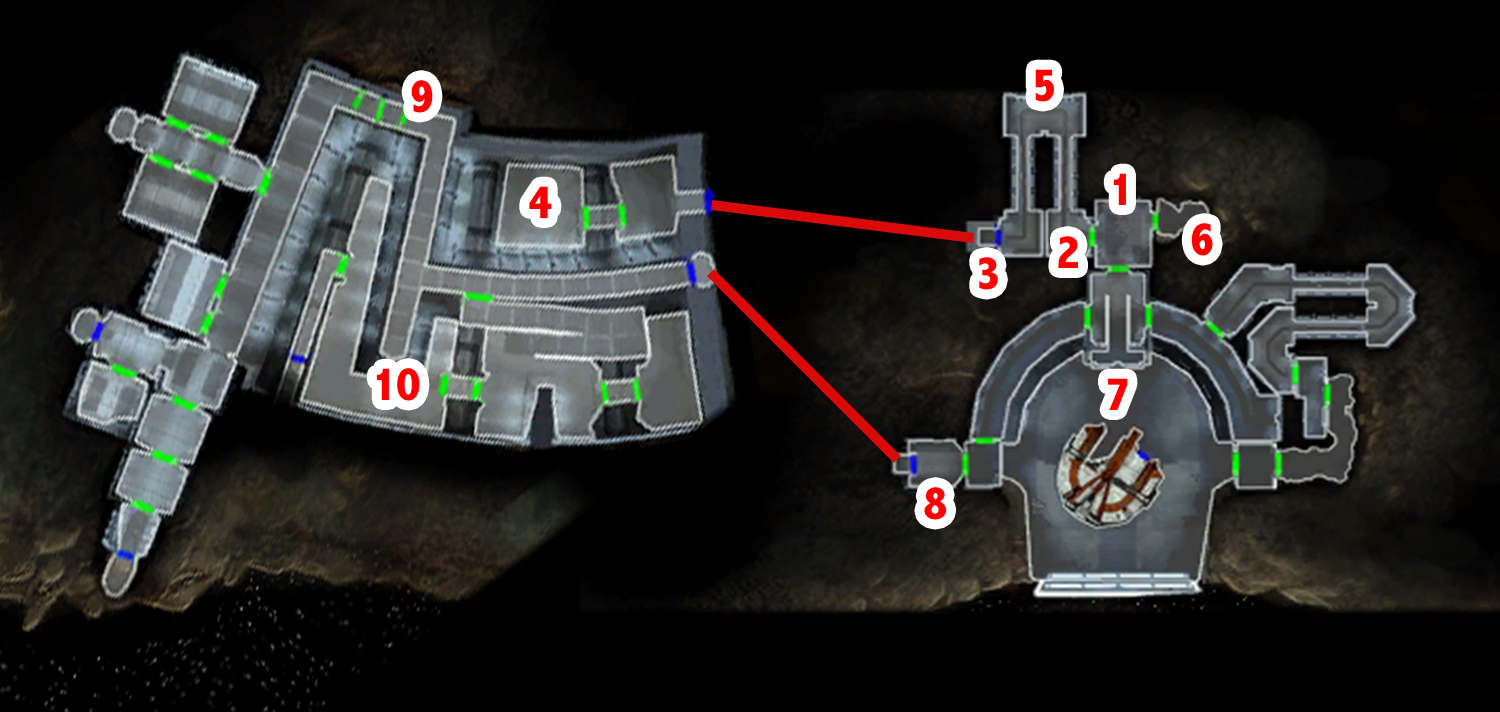
<style>
.page{position:relative;width:1500px;height:712px;background:#000000}
.page>*{position:absolute;margin:0}
.t1{font:48px "AbadiMT-CondensedExtraBold";color:#ff0000}
</style>
<div class="page">
<p class="t1" style="left:1035px;top:69px;width:19px;height:33px">5</p>
<p class="t1" style="left:411px;top:80px;width:22px;height:33px">9</p>
<p class="t1" style="left:1113px;top:173px;width:13px;height:32px">1</p>
<p class="t1" style="left:529px;top:186px;width:23px;height:32px">4</p>
<p class="t1" style="left:1191px;top:223px;width:22px;height:33px">6</p>
<p class="t1" style="left:1058px;top:236px;width:20px;height:32px">2</p>
<p class="t1" style="left:979px;top:257px;width:19px;height:33px">3</p>
<p class="t1" style="left:376px;top:368px;width:44px;height:33px">10</p>
<p class="t1" style="left:1108px;top:378px;width:20px;height:32px">7</p>
<p class="t1" style="left:924px;top:487px;width:23px;height:33px">8</p>
</div>
